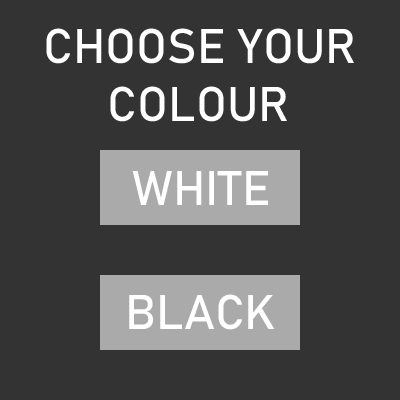
<style>
.page{position:relative;width:400px;height:400px;background:#333333}
.page>*{position:absolute;margin:0}
.t1{font:48px "Bahnschrift";color:#ffffff}
</style>
<div class="page">
<p class="t1" style="left:46px;top:28px;width:308px;height:94px">CHOOSE YOUR<br>     COLOUR</p>
<p class="t1" style="left:132px;top:171px;width:136px;height:34px">WHITE</p>
<p class="t1" style="left:129px;top:294px;width:146px;height:36px">BLACK</p>
</div>
